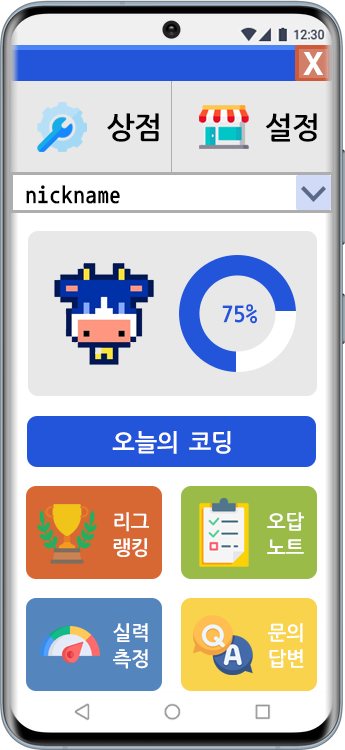
<style>
.page{position:relative;width:345px;height:750px;background:#e8e8e8}
.page>*{position:absolute;margin:0}
.t1{font:30px "H2gtrE";color:#ffffff}
.t2{font:30px "NanumGothicCoding-Bold";letter-spacing:-0.08em;color:#000000}
.t3{font:24px "NanumGothicCoding-Bold";color:#000000}
.t4{font:24px "NanumGothicCoding-Bold";color:#2355da}
.t5{font:24px "NanumGothicCoding-Bold";letter-spacing:-0.08em;color:#ffffff}
.t6{font:20px/26px "NanumGothicCoding-Bold";letter-spacing:-0.08em;color:#ffffff}
</style>
<div class="page">
<p class="t1" style="left:303px;top:52px;width:20px;height:23px">X</p>
<p class="t2" style="left:107px;top:113px;width:52px;height:29px">상점</p>
<p class="t2" style="left:266px;top:113px;width:51px;height:29px">설정</p>
<p class="t3" style="left:26px;top:185px;width:94px;height:19px">nickname</p>
<p class="t4" style="left:222px;top:304px;width:35px;height:20px">75%</p>
<p class="t5" style="left:112px;top:431px;width:119px;height:23px">오늘의 코딩</p>
<p class="t6" style="left:113px;top:512px;width:36px;height:46px">리그<br>랭킹</p>
<p class="t6" style="left:267px;top:512px;width:37px;height:42px">오답<br>노트</p>
<p class="t6" style="left:113px;top:623px;width:35px;height:46px">실력<br>측정</p>
<p class="t6" style="left:268px;top:623px;width:36px;height:45px">문의<br>답변</p>
</div>
